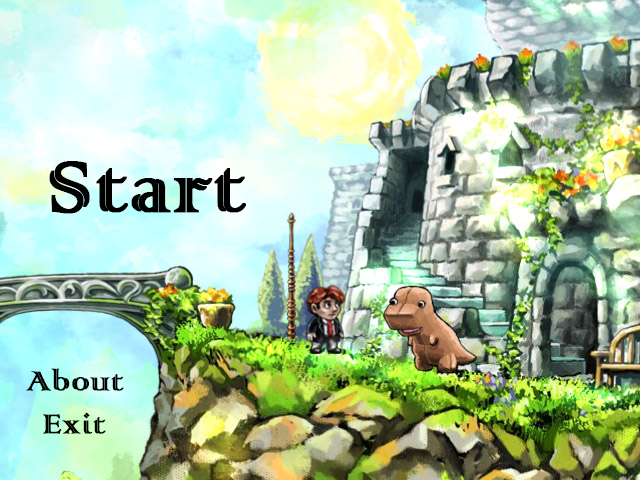
<style>
.page{position:relative;width:640px;height:480px}
.page>*{position:absolute;margin:0}
.t1{font:95px "ColonnaMT";color:#000000;font-weight:bold}
.t2{font:36px "ColonnaMT";color:#000000;font-weight:bold}
</style>
<div class="page">
<p class="t1" style="left:49px;top:161px;width:197px;height:53px">Start</p>
<p class="t2" style="left:26px;top:368px;width:98px;height:23px">About</p>
<p class="t2" style="left:43px;top:412px;width:63px;height:22px">Exit</p>
</div>
